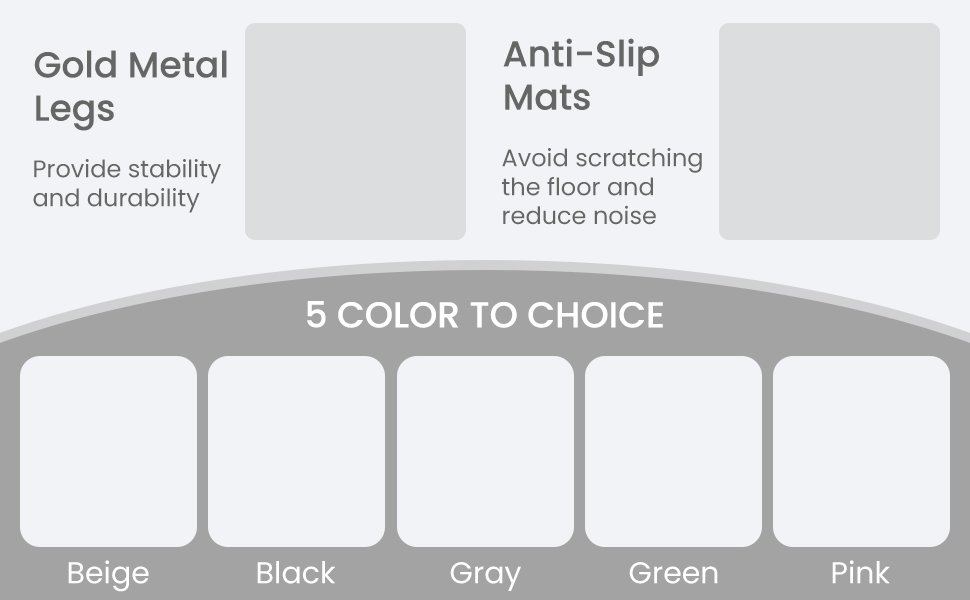
<style>
.page{position:relative;width:970px;height:600px;background:#f2f3f6}
.page>*{position:absolute;margin:0}
.t1{font:36px "Poppins-Medium";color:#666666}
.t2{font:24px "Poppins-Regular";color:#666666}
.t3{font:36px "Poppins-Medium";color:#ffffff}
.t4{font:30px "Poppins-Regular";color:#ffffff}
</style>
<div class="page">
<p class="t1" style="left:503px;top:38px;width:156px;height:72px">Anti-Slip<br>Mats</p>
<p class="t1" style="left:34px;top:50px;width:193px;height:81px">Gold Metal<br>Legs</p>
<p class="t2" style="left:502px;top:148px;width:200px;height:77px">Avoid scratching<br>the floor and<br>reduce noise</p>
<p class="t2" style="left:33px;top:159px;width:188px;height:54px">Provide stability<br>and durability</p>
<p class="t3" style="left:307px;top:301px;width:356px;height:27px">5 COLOR TO CHOICE</p>
<p class="t4" style="left:68px;top:560px;width:81px;height:32px">Beige</p>
<p class="t4" style="left:257px;top:561px;width:78px;height:23px">Black</p>
<p class="t4" style="left:450px;top:562px;width:71px;height:29px">Gray</p>
<p class="t4" style="left:629px;top:562px;width:89px;height:22px">Green</p>
<p class="t4" style="left:832px;top:560px;width:58px;height:24px">Pink</p>
</div>
